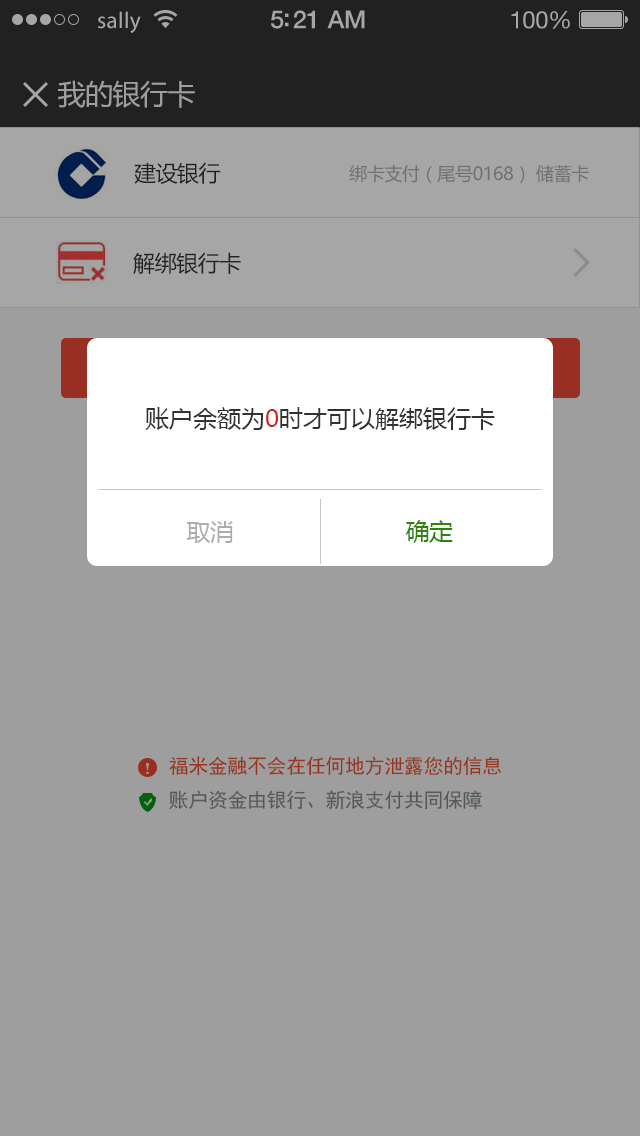
<style>
.page{position:relative;width:640px;height:1136px;background:#9e9e9e}
.page>*{position:absolute;margin:0}
.t1{font:23px "MyriadPro-Regular";letter-spacing:0.02em;color:#a6a6a6}
.t2{font:25px "HelveticaNeue-Medium";letter-spacing:-0.02em;color:#a6a6a6}
.t3{font:24px "HelveticaNeue";letter-spacing:-0.02em;color:#a6a6a6}
.t4{font:28px "MicrosoftYaHei";letter-spacing:-0.02em;color:#9e9e9e}
.t5{font:22px "MicrosoftYaHei";letter-spacing:-0.02em;color:#323232}
.t6{font:18px "MicrosoftYaHei";letter-spacing:-0.02em;color:#707070}
.t7{font:24px "MicrosoftYaHei";color:#323232}
.t8{font:24px "MicrosoftYaHei";color:#cd1f1f}
.t9{font:24px "MicrosoftYaHei";letter-spacing:-0.02em;color:#acacac}
.t10{font:24px "MicrosoftYaHei";letter-spacing:-0.02em;color:#2f820e}
.t11{font:20px "SimHei";letter-spacing:-0.02em;color:#98351c}
.t12{font:20px "SimHei";letter-spacing:-0.02em;color:#585858}
</style>
<div class="page">
<p class="t1" style="left:98px;top:11px;width:43px;height:22px">sally</p>
<p class="t2" style="left:271px;top:10px;width:94px;height:19px">5:21 AM</p>
<p class="t3" style="left:511px;top:11px;width:59px;height:18px">100%</p>
<p class="t4" style="left:58px;top:80px;width:137px;height:28px">我的银行卡</p>
<p class="t5" style="left:134px;top:162px;width:87px;height:22px">建设银行</p>
<p class="t6" style="left:349px;top:165px;width:240px;height:19px">绑卡支付（尾号0168） 储蓄卡</p>
<p class="t5" style="left:133px;top:252px;width:108px;height:22px">解绑银行卡</p>
<p class="t7" style="left:145px;top:407px;width:350px;height:23px">账户余额为<span class="t8">0</span>时才可以解绑银行卡</p>
<p class="t9" style="left:186px;top:521px;width:47px;height:22px">取消</p>
<p class="t10" style="left:405px;top:520px;width:48px;height:23px">确定</p>
<p class="t11" style="left:169px;top:756px;width:333px;height:20px">福米金融不会在任何地方泄露您的信息</p>
<p class="t12" style="left:169px;top:790px;width:313px;height:20px">账户资金由银行、新浪支付共同保障</p>
</div>
